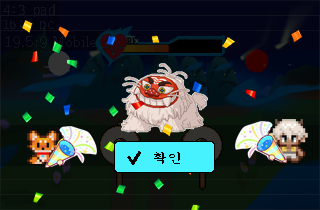
<style>
.page{position:relative;width:320px;height:210px}
.page>*{position:absolute;margin:0}
.t1{font:15px "D2Codingligature";color:#11121e}
.t2{font:14px "AdobeMyungjoStd-Medium";color:#11121e}
.t3{font:15px "Sam3KRFont";color:#000000}
</style>
<div class="page">
<p class="t1" style="left:3px;top:4px;width:52px;height:13px">4:3 pad</p>
<p class="t2" style="left:6px;top:35px;width:90px;height:13px">19.5:9 Mobile</p>
<p class="t3" style="left:154px;top:152px;width:26px;height:12px">확인</p>
</div>
